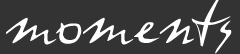
<style>
.page{position:relative;width:240px;height:54px;background:#333333}
.page>*{position:absolute;margin:0}
.t1{font:72px "Dali";color:#ffffff}
</style>
<div class="page">
<p class="t1" style="left:6px;top:0px;width:226px;height:54px">moments</p>
</div>
